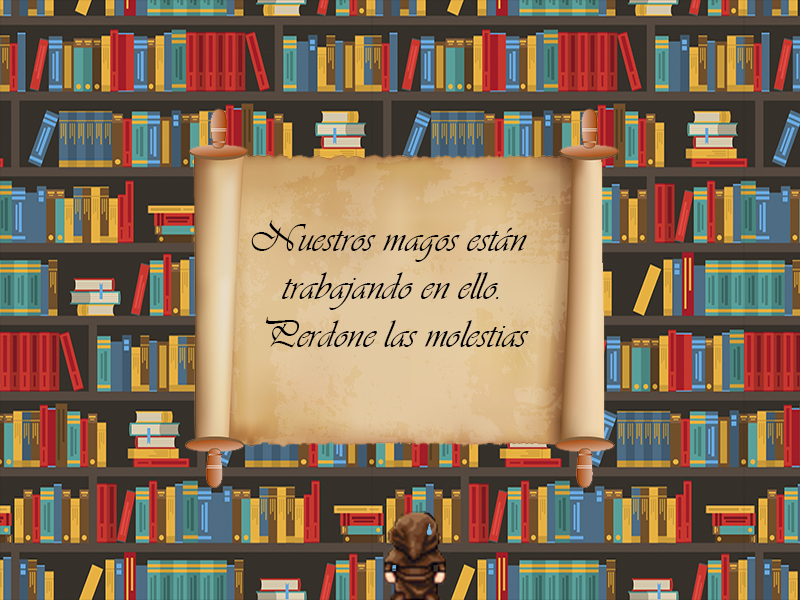
<style>
.page{position:relative;width:800px;height:600px}
.page>*{position:absolute;margin:0}
.t1{font:40px "Vivaldii";color:#000000}
</style>
<div class="page">
<p class="t1" style="left:251px;top:220px;width:278px;height:128px;text-align:center">Nuestros magos están <br>trabajando en ello.<br>Perdone las molestias</p>
</div>
